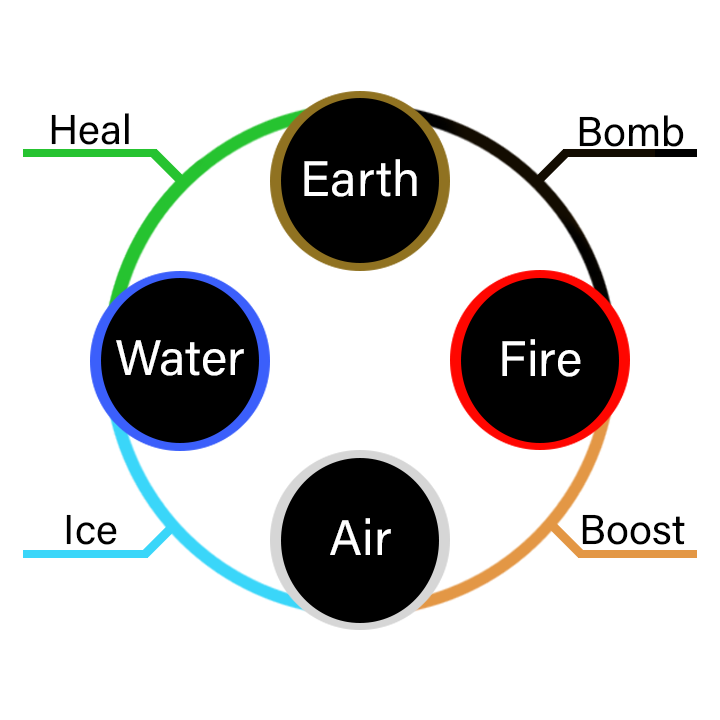
<style>
.page{position:relative;width:720px;height:720px;background:#ffffff}
.page>*{position:absolute;margin:0}
.t1{font:41.7px "AcuminConcept-Regular";color:#000000}
.t2{font:50px "AcuminConcept-Regular";color:#ffffff}
</style>
<div class="page">
<p class="t1" style="left:51px;top:113px;width:78px;height:32px">Heal</p>
<p class="t1" style="left:579px;top:115px;width:105px;height:32px">Bomb</p>
<p class="t2" style="left:304px;top:159px;width:113px;height:38px">Earth</p>
<p class="t2" style="left:116px;top:340px;width:128px;height:36px">Water</p>
<p class="t2" style="left:502px;top:339px;width:79px;height:38px">Fire</p>
<p class="t1" style="left:66px;top:514px;width:51px;height:31px">Ice</p>
<p class="t2" style="left:330px;top:518px;width:61px;height:37px">Air</p>
<p class="t1" style="left:582px;top:514px;width:103px;height:31px">Boost</p>
</div>
